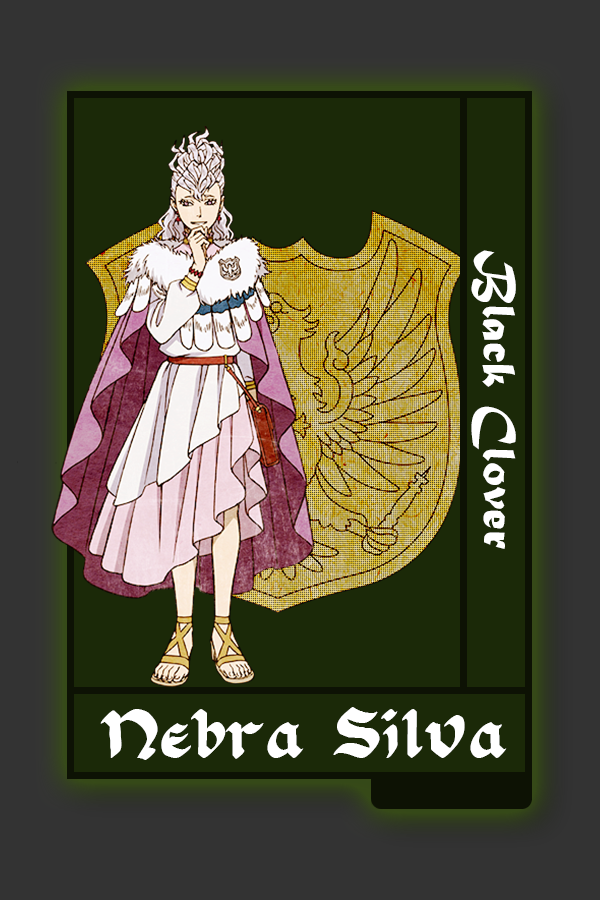
<style>
.page{position:relative;width:600px;height:900px;background:#1b2908}
.page>*{position:absolute;margin:0}
.t1{font:48.8px "MaturaMTScriptCapitals";color:#ffffff}
.t2{font:60.3px "FloranteatLaura";color:#ffffff}
</style>
<div class="page">
<p class="t1" style="left:471px;top:250px;width:45px;height:299px;rotate:90deg">Black Clover</p>
<p class="t2" style="left:100px;top:707px;width:407px;height:53px">Nebra Silva</p>
</div>
